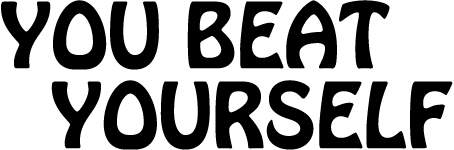
<style>
.page{position:relative;width:454px;height:150px;background:#ffffff}
.page>*{position:absolute;margin:0}
.t1{font:80px/80px "HoboStd";color:#000000;text-transform:uppercase}
</style>
<div class="page">
<p class="t1" style="left:1px;top:0px;width:452px;height:150px">You beat<br>yourself</p>
</div>
